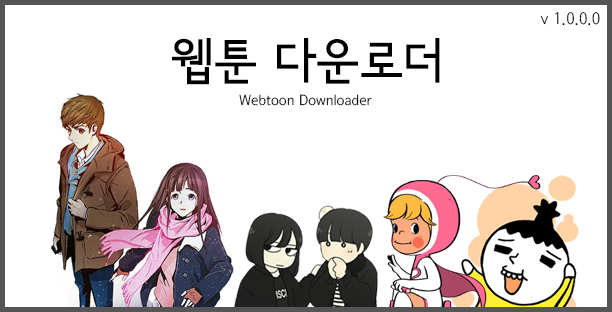
<style>
.page{position:relative;width:612px;height:312px;background:#ffffff}
.page>*{position:absolute;margin:0}
.t1{font:16.5px "SeoulNamsanL";color:#000000}
.t2{font:49.4px "SeoulNamsanB";color:#000000}
.t3{font:14.4px "SeoulNamsanL";color:#000000}
</style>
<div class="page">
<p class="t1" style="left:540px;top:12px;width:60px;height:14px">v 1.0.0.0</p>
<p class="t2" style="left:172px;top:38px;width:268px;height:47px">웹툰 다운로더</p>
<p class="t3" style="left:239px;top:94px;width:133px;height:12px">Webtoon Downloader</p>
</div>
